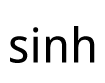
<style>
.page{position:relative;width:105px;height:83px;background:#ffffff}
.page>*{position:absolute;margin:0}
.t1{font:47.9px "DroidSans";color:#000000}
</style>
<div class="page">
<p class="t1" style="left:10px;top:26px;width:85px;height:37px">sinh</p>
</div>
